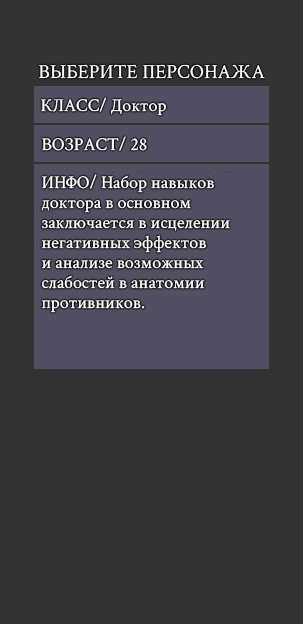
<style>
.page{position:relative;width:303px;height:624px;background:#333333}
.page>*{position:absolute;margin:0}
.t1{font:20px "CrimsonText-Regular";color:#ffffff}
.t2{font:18px "CrimsonText-Regular";color:#ffffff}
.t3{font:18px/20px "CrimsonText-Regular";color:#ffffff}
</style>
<div class="page">
<p class="t1" style="left:39px;top:64px;width:226px;height:15px">ВЫБЕРИТЕ ПЕРСОНАЖА</p>
<p class="t2" style="left:41px;top:97px;width:125px;height:19px">КЛАСС/ Доктор</p>
<p class="t2" style="left:42px;top:136px;width:105px;height:15px">ВОЗРАСТ/ 28</p>
<p class="t3" style="left:41px;top:174px;width:189px;height:139px">ИНФО/ Набор навыков<br>доктора в основном<br>заключается в исцелении<br>негативных эффектов<br>и анализе возможных<br>слабостей в анатомии<br>противников.</p>
</div>
